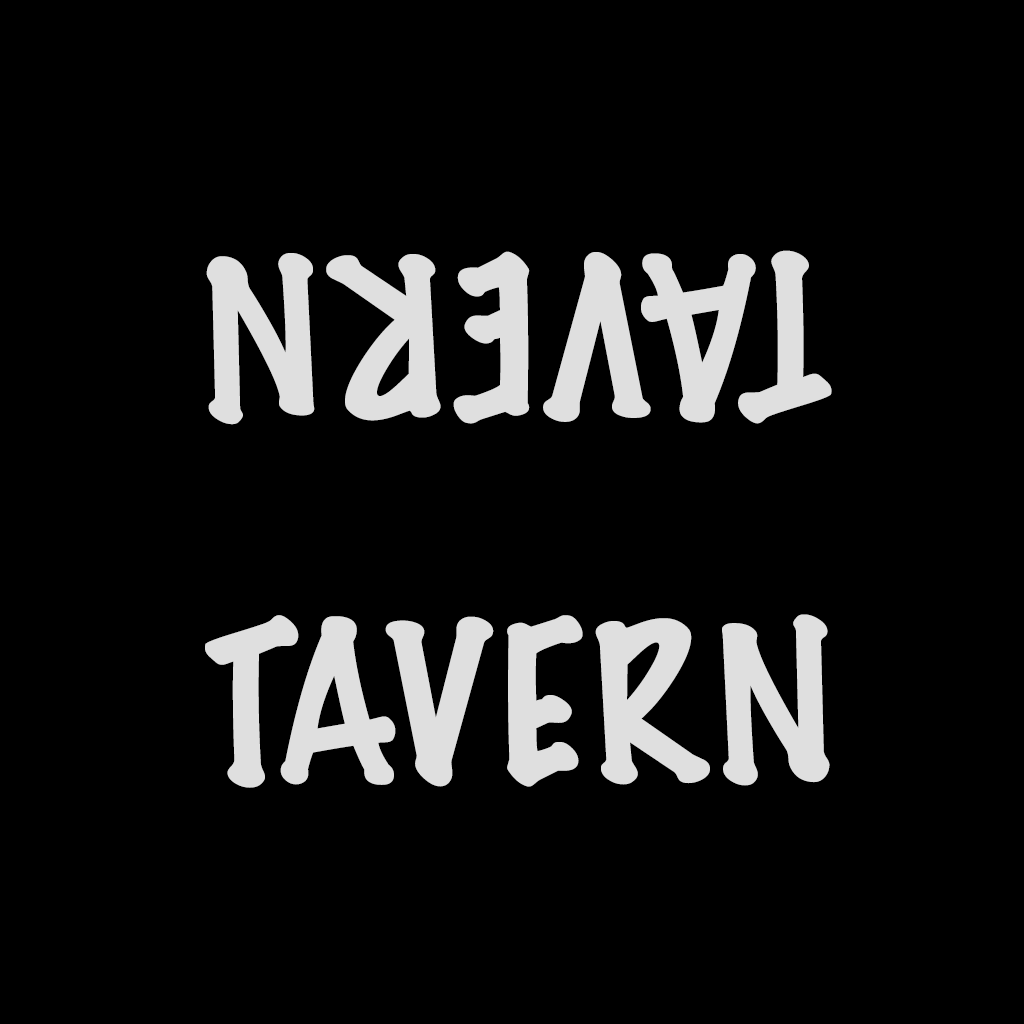
<style>
.page{position:relative;width:1024px;height:1024px;background:#000000}
.page>*{position:absolute;margin:0}
.t1{font:200.3px "MarkerFelt-Thin";color:#dfdfdf}
.t2{font:200px "MarkerFelt-Thin";color:#dfdfdf}
</style>
<div class="page">
<p class="t1" style="left:206px;top:250px;width:626px;height:175px;rotate:-180deg">TAVERN</p>
<p class="t2" style="left:205px;top:614px;width:625px;height:174px">TAVERN</p>
</div>
